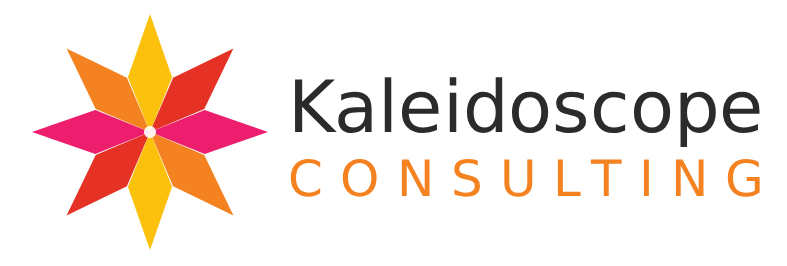
<style>
.page{position:relative;width:787px;height:266px;background:#ffffff}
.page>*{position:absolute;margin:0}
.t1{font:72px "Poppins";color:#2b2b2b}
.t2{font:50px "Poppins";letter-spacing:0.34em;color:#f58220}
</style>
<div class="page">
<p class="t1" style="left:295px;top:77px;width:465px;height:70px">Kaleidoscope</p>
<p class="t2" style="left:290px;top:158px;width:470px;height:39px">CONSULTING</p>
</div>
